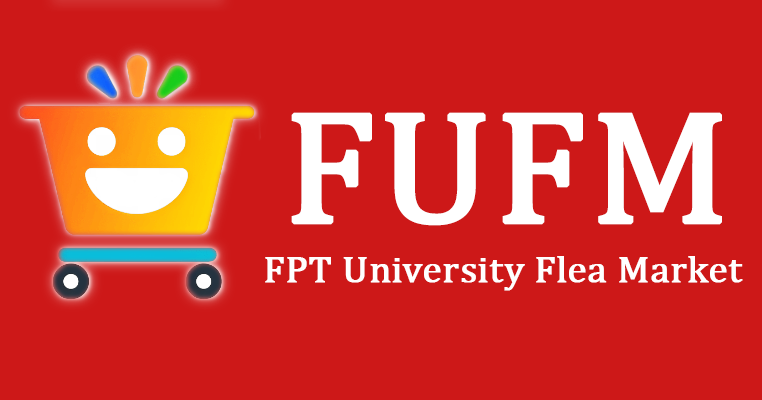
<style>
.page{position:relative;width:762px;height:400px;background:#cd1818}
.page>*{position:absolute;margin:0}
.t1{font:159.9px "Cambria";color:#ffffff;font-weight:bold;scale:1.06 1}
.t2{font:36.8px "Cambria";color:#ffffff;font-weight:bold;scale:1.06 1}
</style>
<div class="page">
<p class="t1" style="left:291px;top:112px;width:431px;height:114px">FUFM</p>
<p class="t2" style="left:265px;top:256px;width:478px;height:35px">FPT University Flea Market</p>
</div>
